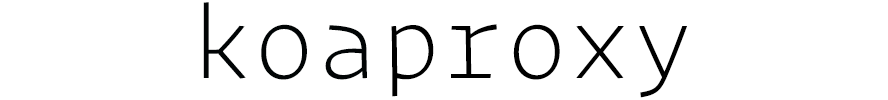
<style>
.page{position:relative;width:888px;height:100px;background:#ffffff}
.page>*{position:absolute;margin:0}
.t1{font:108px "OperatorMono-XLight";letter-spacing:0.035em;color:#000000}
.t2{font:108px "OperatorMono-XLight";letter-spacing:0.035em;color:#010405}
</style>
<div class="page">
<p class="t1" style="left:203px;top:2px;width:484px;height:96px"><span class="t2">   koa</span>proxy</p>
</div>
